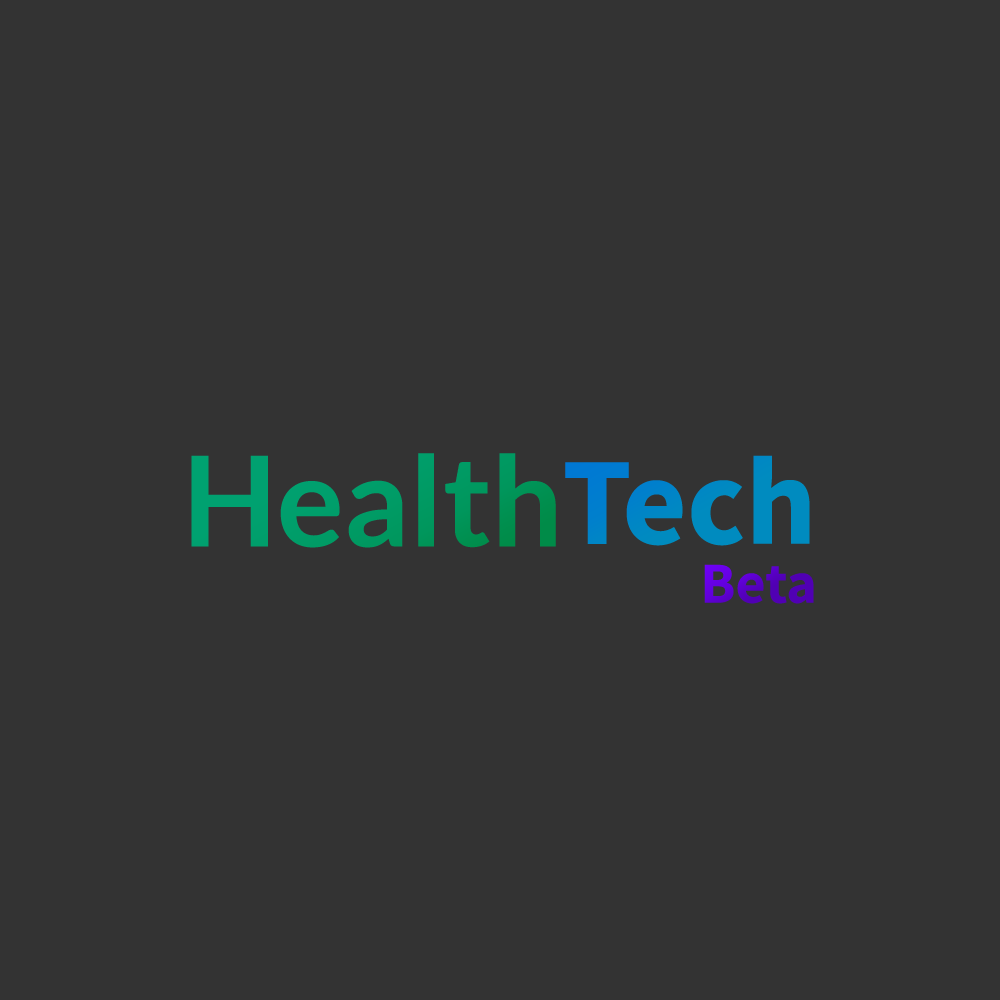
<style>
.page{position:relative;width:1000px;height:1000px;background:#333333}
.page>*{position:absolute;margin:0}
.t1{font:125px "Lato-Bold";color:#009b65}
.t2{font:125px "SourceSansPro-Bold";color:#0089c1}
.t3{font:58.3px "SourceSansPro-Bold";color:#5700c3}
</style>
<div class="page">
<p class="t1" style="left:191px;top:453px;width:365px;height:95px">Health</p>
<p class="t2" style="left:565px;top:455px;width:245px;height:91px">Tech</p>
<p class="t3" style="left:704px;top:564px;width:110px;height:40px">Beta</p>
</div>
